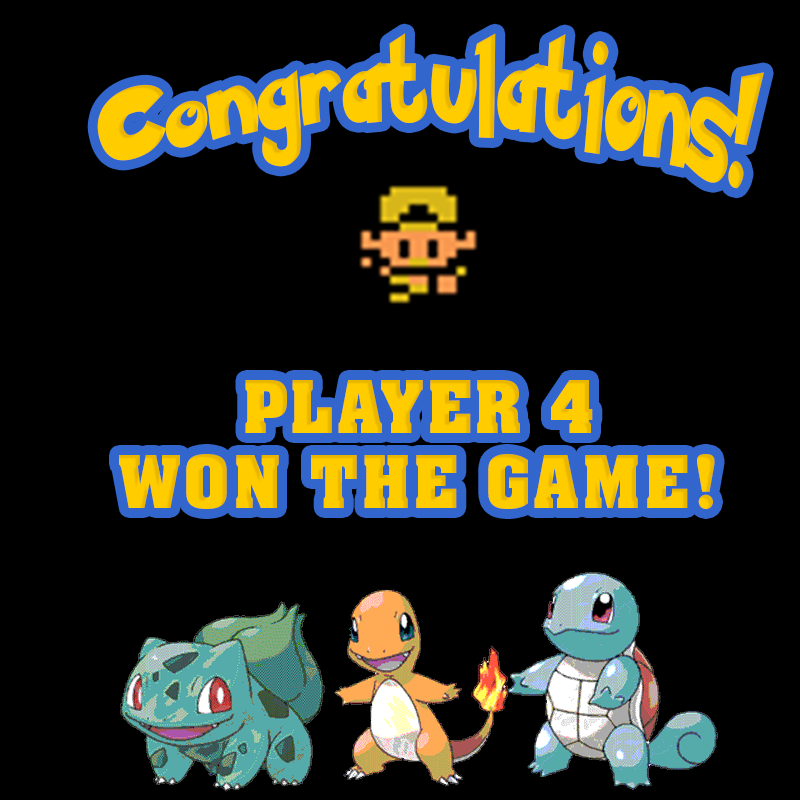
<style>
.page{position:relative;width:800px;height:800px;background:#000000}
.page>*{position:absolute;margin:0}
.t1{font:90.7px "PokemonSolidNormal";letter-spacing:0.06em;color:#ffcc00;scale:0.77 1}
.t2{font:124.1px "PokemonSolidNormal";letter-spacing:0.06em;color:#ffcc00;scale:0.77 1}
.t3{font:98.7px "PokemonSolidNormal";letter-spacing:0.06em;color:#ffcc00;scale:0.77 1}
.t4{font:62.4px "AachenStd-Bold";letter-spacing:0.06em;color:#ffcc00}
</style>
<div class="page">
<p class="t1" style="left:97px;top:33px;width:667px;height:156px"><span class="t2">C</span><span class="t3">ong</span>ratulations!</p>
<p class="t4" style="left:119px;top:380px;width:596px;height:129px;text-align:center">PLAYER 4<br>WON THE GAME!</p>
</div>
